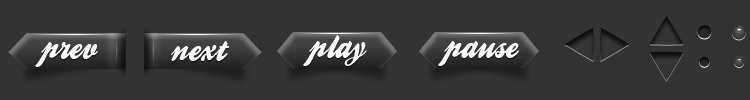
<style>
.page{position:relative;width:750px;height:100px;background:#333333}
.page>*{position:absolute;margin:0}
.t1{font:33.3px "BallparkWeiner";color:#f7f7f7}
</style>
<div class="page">
<p class="t1" style="left:171px;top:41px;width:59px;height:20px">next</p>
<p class="t1" style="left:303px;top:35px;width:64px;height:31px">play</p>
<p class="t1" style="left:438px;top:41px;width:81px;height:25px">pause</p>
<p class="t1" style="left:35px;top:42px;width:63px;height:25px">prev</p>
</div>
